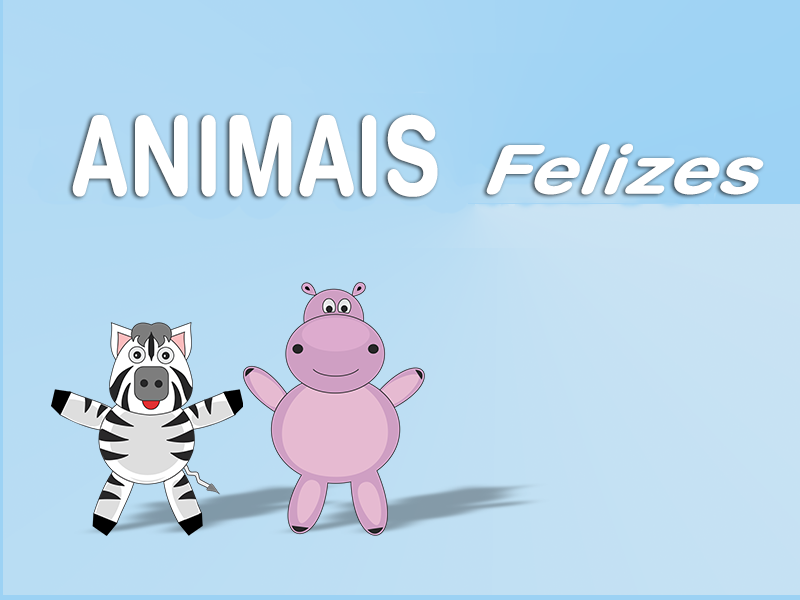
<style>
.page{position:relative;width:800px;height:600px}
.page>*{position:absolute;margin:0}
.t1{font:107.9px "HelveticaRoundedLTStd-Bd";color:#ffffff;font-weight:bold;scale:0.76 1}
.t2{font:67.8px "HelveticaRoundedLTStd-BdO";color:#ffffff;font-weight:bold;scale:1.12 1}
</style>
<div class="page">
<p class="t1" style="left:72px;top:114px;width:366px;height:83px">ANIMAIS</p>
<p class="t2" style="left:486px;top:143px;width:278px;height:52px">Felizes</p>
</div>
